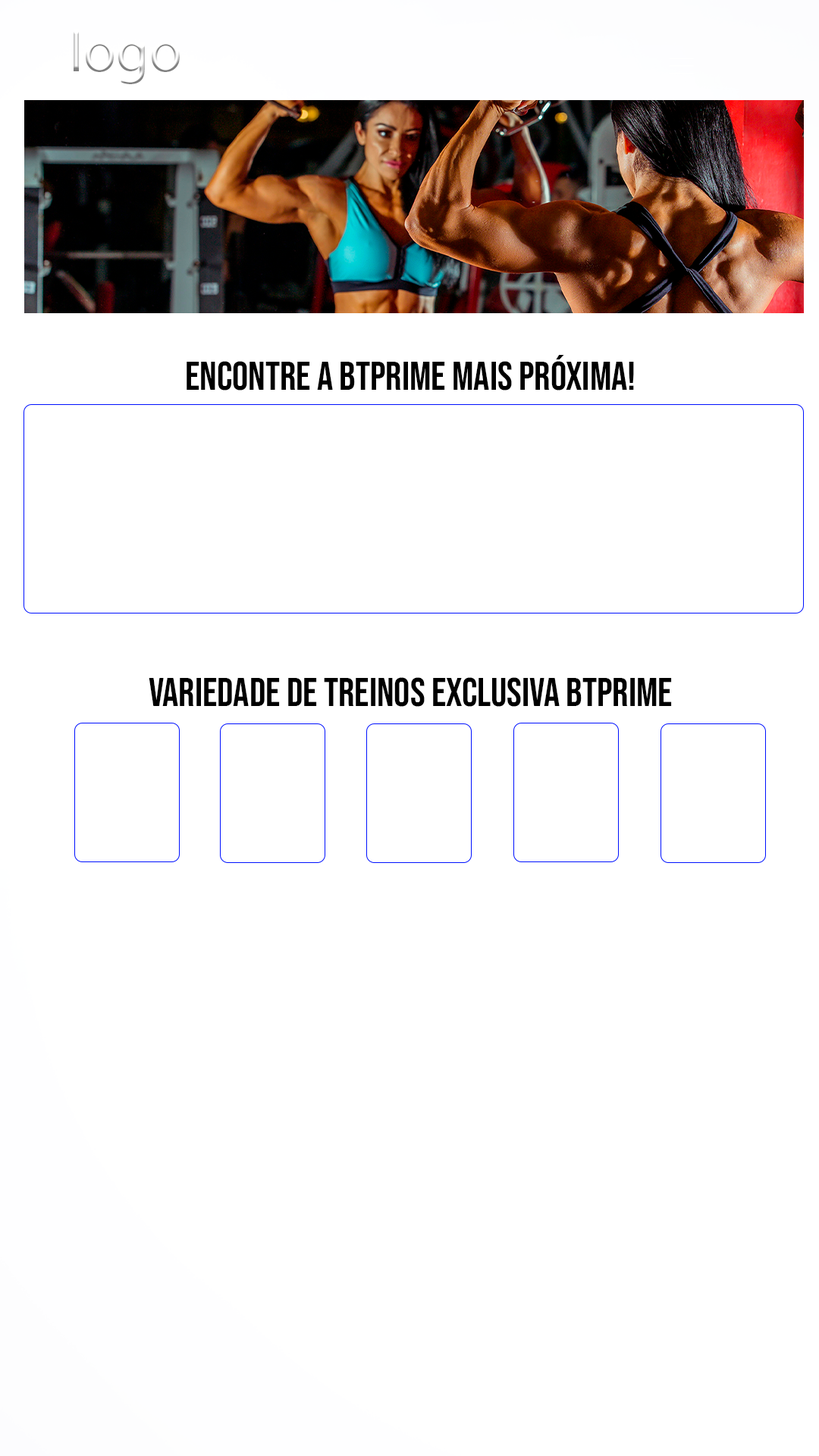
<style>
.page{position:relative;width:819px;height:1456px;background:#ffffff}
.page>*{position:absolute;margin:0}
.t1{font:59.9px "MyriadPro-Regular"}
.t2{font:40.1px "BebasNeue-Regular";color:#000000}
</style>
<div class="page">
<p class="t1" style="left:74px;top:29px;width:106px;height:55px">logo</p>
<p class="t2" style="left:187px;top:355px;width:447px;height:36px">Encontre a BTPrime mais próxima!</p>
<p class="t2" style="left:149px;top:677px;width:523px;height:30px">VARIEDADE DE TREINOS EXCLUSIVA BTPRIME</p>
</div>
